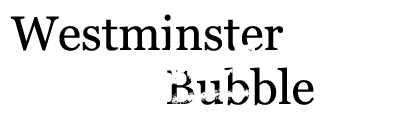
<style>
.page{position:relative;width:400px;height:120px;background:#ffffff}
.page>*{position:absolute;margin:0}
.t1{font:48px "Georgia";color:#000000}
</style>
<div class="page">
<p class="t1" style="left:10px;top:14px;width:273px;height:37px">Westminster</p>
<p class="t1" style="left:167px;top:67px;width:147px;height:39px">Bubble</p>
</div>
